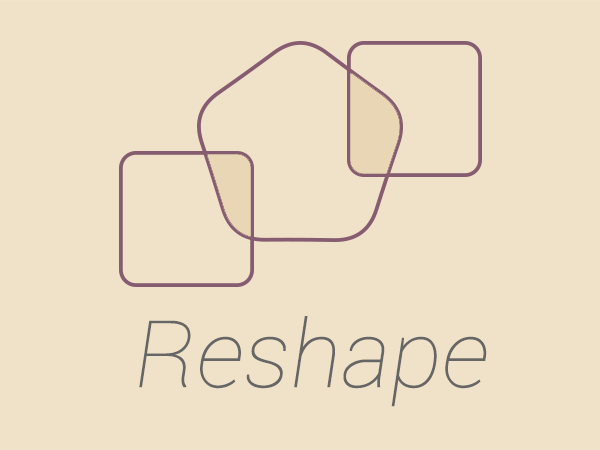
<style>
.page{position:relative;width:600px;height:450px;background:#f0e2c8}
.page>*{position:absolute;margin:0}
.t1{font:93.3px "Roboto-ThinItalic";color:#666666}
</style>
<div class="page">
<p class="t1" style="left:139px;top:316px;width:348px;height:91px">Reshape</p>
</div>
